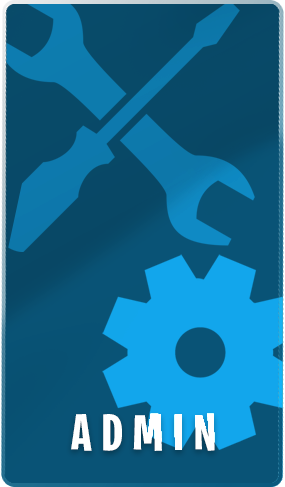
<style>
.page{position:relative;width:285px;height:487px}
.page>*{position:absolute;margin:0}
.t1{font:51.1px "BurbankBigCondensed-Bold";letter-spacing:0.2em;color:#ffffff}
</style>
<div class="page">
<p class="t1" style="left:71px;top:413px;width:144px;height:38px">ADMIN</p>
</div>
